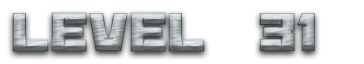
<style>
.page{position:relative;width:364px;height:64px;background:#ffffff}
.page>*{position:absolute;margin:0}
.t1{font:60px "BananaBrick"}
</style>
<div class="page">
<p class="t1" style="left:12px;top:12px;width:303px;height:40px">Level  31</p>
</div>
